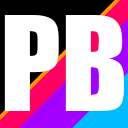
<style>
.page{position:relative;width:128px;height:128px;background:#ffffff}
.page>*{position:absolute;margin:0}
.t1{font:121.4px "Impact";color:#ffffff}
</style>
<div class="page">
<p class="t1" style="left:4px;top:15px;width:120px;height:96px">PB</p>
</div>
